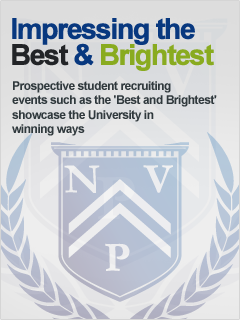
<style>
.page{position:relative;width:240px;height:320px}
.page>*{position:absolute;margin:0}
.t1{font:28.6px/26px "Arial-BoldMT";letter-spacing:-0.075em;color:#08387f;font-weight:bold}
.t2{font:28.6px/26px "Arial-BoldMT";letter-spacing:-0.075em;color:#222427;font-weight:bold}
.t3{font:28.6px/26px "Arial-BoldMT";letter-spacing:-0.075em;color:#89ab20;font-weight:bold}
.t4{font:12px "Arial-BoldMT";letter-spacing:-0.04em;color:#30393d}
</style>
<div class="page">
<p class="t1" style="left:12px;top:18px;width:202px;height:53px;text-align:justify">Impressing the <br><span class="t2">Best </span>&amp; <span class="t3">Brightest</span></p>
<p class="t4" style="left:12px;top:81px;width:205px;height:55px">Prospective student recruiting<br>events such as the 'Best and Brightest' <br>showcase the University in <br>winning ways</p>
</div>
